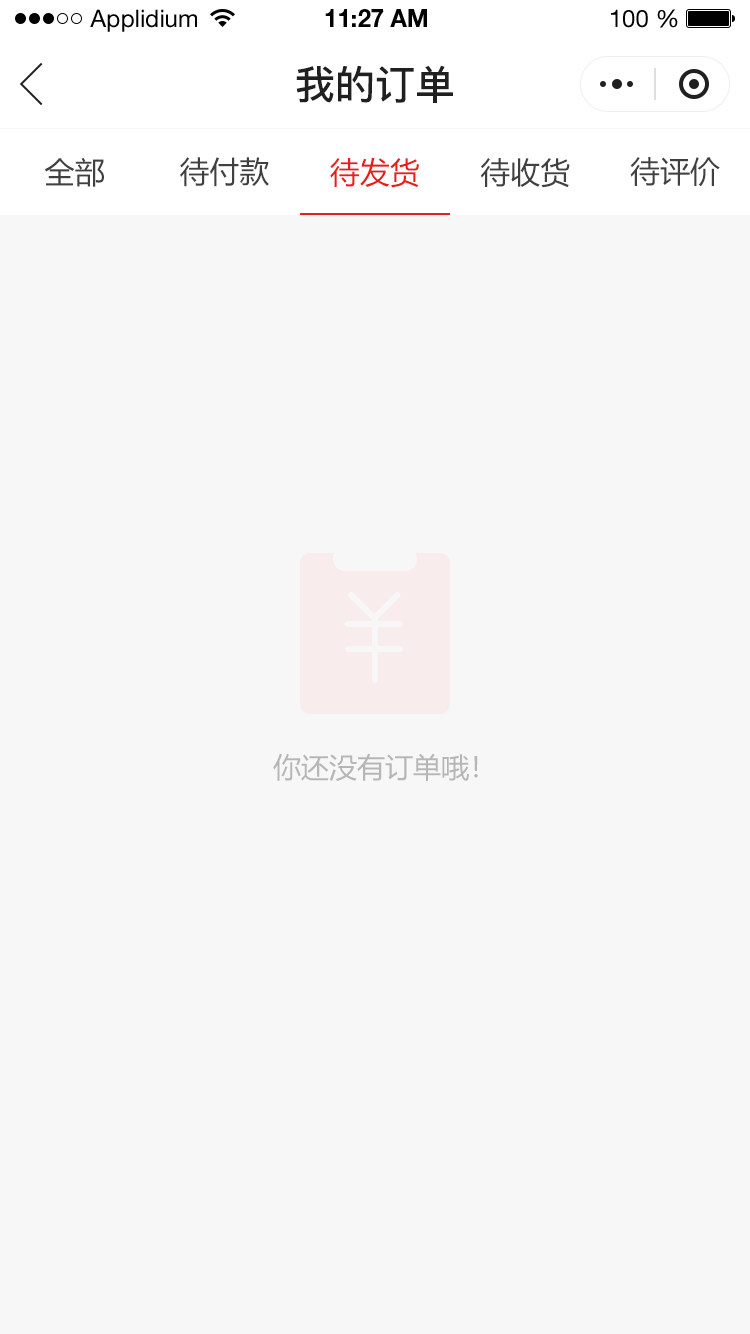
<style>
.page{position:relative;width:750px;height:1334px;background:#f7f7f7}
.page>*{position:absolute;margin:0}
.t1{font:24px "HelveticaNeueLTStd-Roman";color:#000000}
.t2{font:24px "HelveticaNeueLTStd-Bd";color:#000000}
.t3{font:40px "PingFang-SC-Bold";color:#202020;text-transform:uppercase}
.t4{font:30px "MicrosoftYaHei";color:#404040;text-transform:uppercase}
.t5{font:30px "MicrosoftYaHei";color:#e61f18;text-transform:uppercase}
.t6{font:28px "MicrosoftYaHei";color:#b6b6b6;text-transform:uppercase}
</style>
<div class="page">
<p class="t1" style="left:90px;top:9px;width:107px;height:23px">Applidium</p>
<p class="t2" style="left:325px;top:9px;width:102px;height:18px">11:27 AM</p>
<p class="t1" style="left:611px;top:9px;width:67px;height:19px">100 %</p>
<p class="t3" style="left:296px;top:65px;width:157px;height:38px">我的订单</p>
<p class="t4" style="left:44px;top:157px;width:60px;height:30px">全部</p>
<p class="t4" style="left:180px;top:157px;width:89px;height:30px">待付款</p>
<p class="t5" style="left:330px;top:157px;width:89px;height:31px">待发货</p>
<p class="t4" style="left:480px;top:158px;width:90px;height:30px">待收货</p>
<p class="t4" style="left:630px;top:157px;width:90px;height:30px">待评价</p>
<p class="t6" style="left:273px;top:753px;width:205px;height:28px">你还没有订单哦！</p>
</div>
